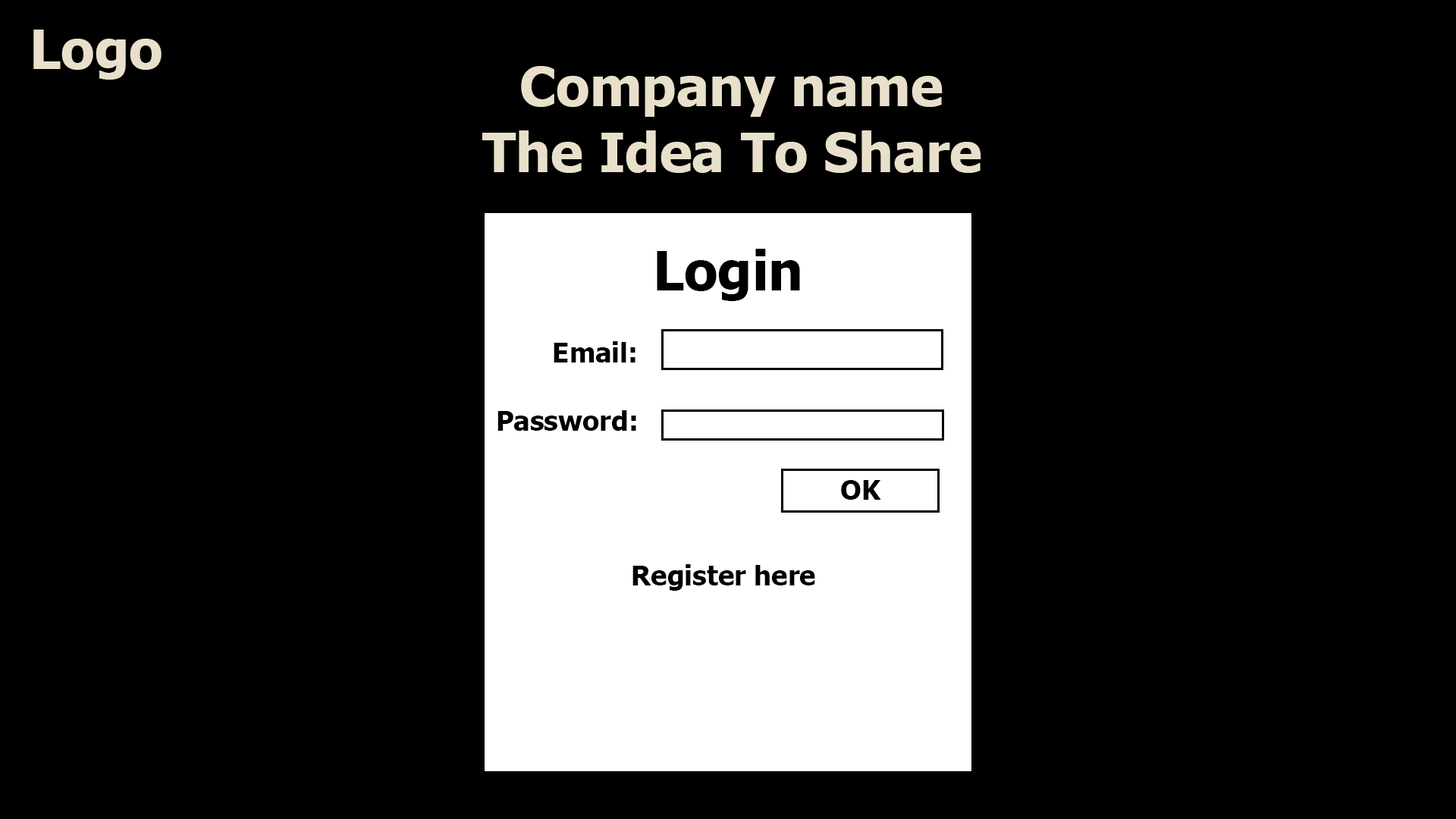
<style>
.page{position:relative;width:1456px;height:819px;background:#000000}
.page>*{position:absolute;margin:0}
.t1{font:54.6px "Tahoma-Bold";color:#e8e0cb}
.t2{font:54.6px "Tahoma-Bold";color:#000000}
.t3{font:27.3px "Tahoma-Bold";color:#000000}
</style>
<div class="page">
<p class="t1" style="left:33px;top:30px;width:129px;height:50px">Logo</p>
<p class="t1" style="left:521px;top:66px;width:422px;height:51px">Company name</p>
<p class="t1" style="left:482px;top:130px;width:499px;height:43px">The Idea To Share</p>
<p class="t2" style="left:657px;top:249px;width:143px;height:52px">Login</p>
<p class="t3" style="left:554px;top:341px;width:81px;height:21px">Email:</p>
<p class="t3" style="left:497px;top:410px;width:139px;height:21px">Password:</p>
<p class="t3" style="left:841px;top:480px;width:40px;height:20px">OK</p>
<p class="t3" style="left:632px;top:564px;width:183px;height:27px">Register here</p>
</div>
